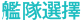
<style>
.page{position:relative;width:82px;height:21px;background:#ffffff}
.page>*{position:absolute;margin:0}
.t1{font:20px "GothicMB101Pr6N-Medium";color:#1dbdc0}
</style>
<div class="page">
<p class="t1" style="left:2px;top:0px;width:79px;height:20px">艦隊選擇</p>
</div>
